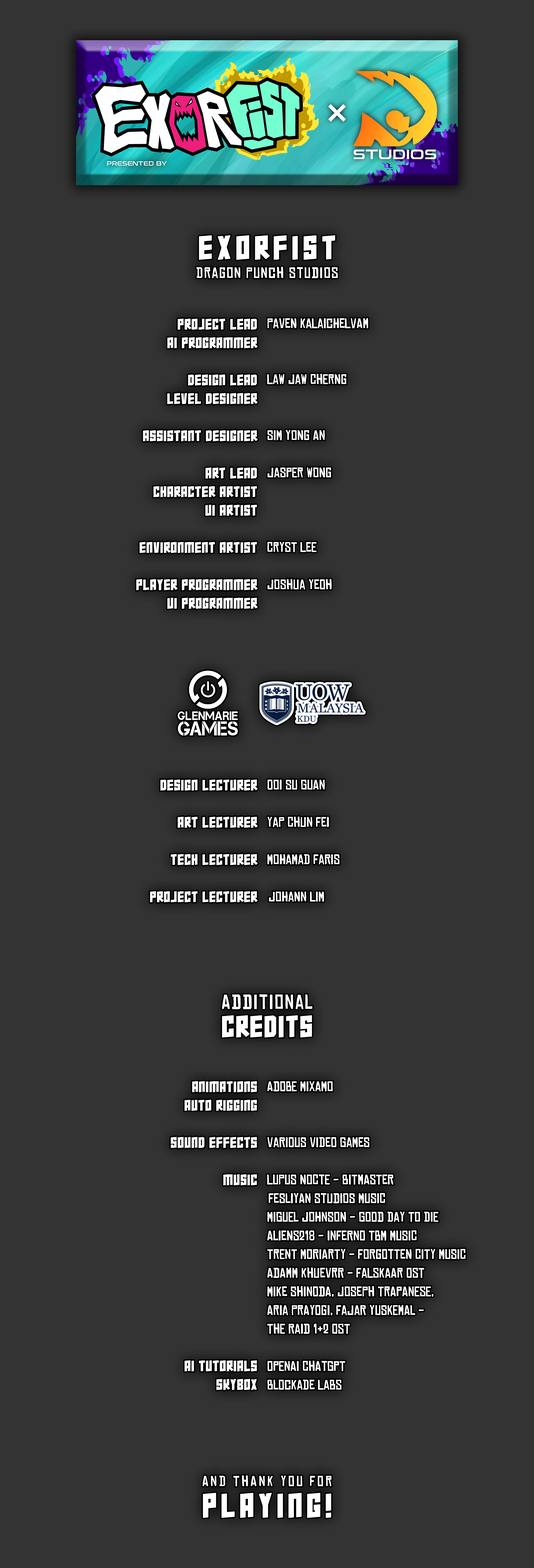
<style>
.page{position:relative;width:534px;height:1568px;background:#333333}
.page>*{position:absolute;margin:0}
.t1{font:14.6px/20.4px "ChineseRocksRg-Regular";letter-spacing:0.06em;color:#fefefe}
.t2{font:21.9px/20.4px "SuperSquad";letter-spacing:0.22em;color:#fefefe}
.t3{font:10px/18.6px "SuperSquad";letter-spacing:0.06em;color:#ffffff}
.t4{font:13.4px/18.7px "ChineseRocksRg-Regular";color:#ffffff}
.t5{font:19.7px/20.4px "ChineseRocksRg-Regular";letter-spacing:0.06em;color:#ffffff}
.t6{font:19.8px/26.5px "SuperSquad";letter-spacing:0.08em;color:#ffffff}
.t7{font:14.1px/29.4px "ChineseRocksRg-Regular";letter-spacing:0.14em;color:#ffffff}
.t8{font:22.4px/29.4px "SuperSquad";letter-spacing:0.2em;color:#ffffff}
</style>
<div class="page">
<p class="t1" style="left:197px;top:235px;width:141px;height:43px;text-align:center"><span class="t2">Exorfist<br></span>Dragon Punch Studios</p>
<p class="t3" style="left:136px;top:319px;width:122px;height:290px;text-align:right">Project Lead<br>AI Programmer<br><br>Design Lead<br>level designer<br><br>ASsistant Designer<br><br>Art Lead<br>character artist<br>Ui artist<br><br>Environment Artist<br><br>PLayer Programmer<br>ui programmer</p>
<p class="t4" style="left:267px;top:318px;width:102px;height:271px">Paven Kalaichelvam<br><br><br>Law Jaw Cherng<br><br><br>Sim Yong An<br><br>Jasper Wong<br><br><br><br>Cryst Lee<br><br>Joshua Yeoh</p>
<p class="t3" style="left:150px;top:780px;width:108px;height:122px;text-align:right">design lecturer<br><br>Art Lecturer<br><br>tech Lecturer<br><br>Project Lecturer</p>
<p class="t4" style="left:268px;top:780px;width:72px;height:122px">Ooi Su Guan<br><br>Yap Chun Fei<br><br>Mohamad Faris<br> <br> Johann Lim</p>
<p class="t5" style="left:222px;top:994px;width:91px;height:44px;text-align:center">Additional<br><span class="t6">Credits</span></p>
<p class="t3" style="left:171px;top:1081px;width:86px;height:309px;text-align:right">Animations<br>auto rigging<br><br>Sound Effects<br><br>Music<br><br><br><br><br><br><br><br><br><br>Ai tutorials<br>skybox</p>
<p class="t4" style="left:267px;top:1081px;width:199px;height:309px">Adobe Mixamo<br><br><br>Various Video Games<br><br>Lupus Nocte - Bitmaster<br> Fesliyan Studios Music<br>Miguel Johnson - Good Day To Die<br>Aliens218 - Inferno TBM Music<br>Trent Moriarty - Forgotten City Music<br>Adamm Khuevrr - Falskaar OST<br>Mike Shinoda, Joseph Trapanese,<br>Aria Prayogi, Fajar Yuskemal - <br>The Raid 1&amp;2 OST<br><br>OpenAI Chatgpt<br>Blockade Labs</p>
<p class="t7" style="left:203px;top:1475px;width:129px;height:43px;text-align:center">And Thank you for<br><span class="t8">Playing!</span></p>
</div>
